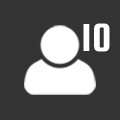
<style>
.page{position:relative;width:120px;height:120px;background:#333333}
.page>*{position:absolute;margin:0}
.t1{font:41.7px "SquadaOne-Regular";color:#ffffff}
</style>
<div class="page">
<p class="t1" style="left:83px;top:23px;width:27px;height:29px">10</p>
</div>
